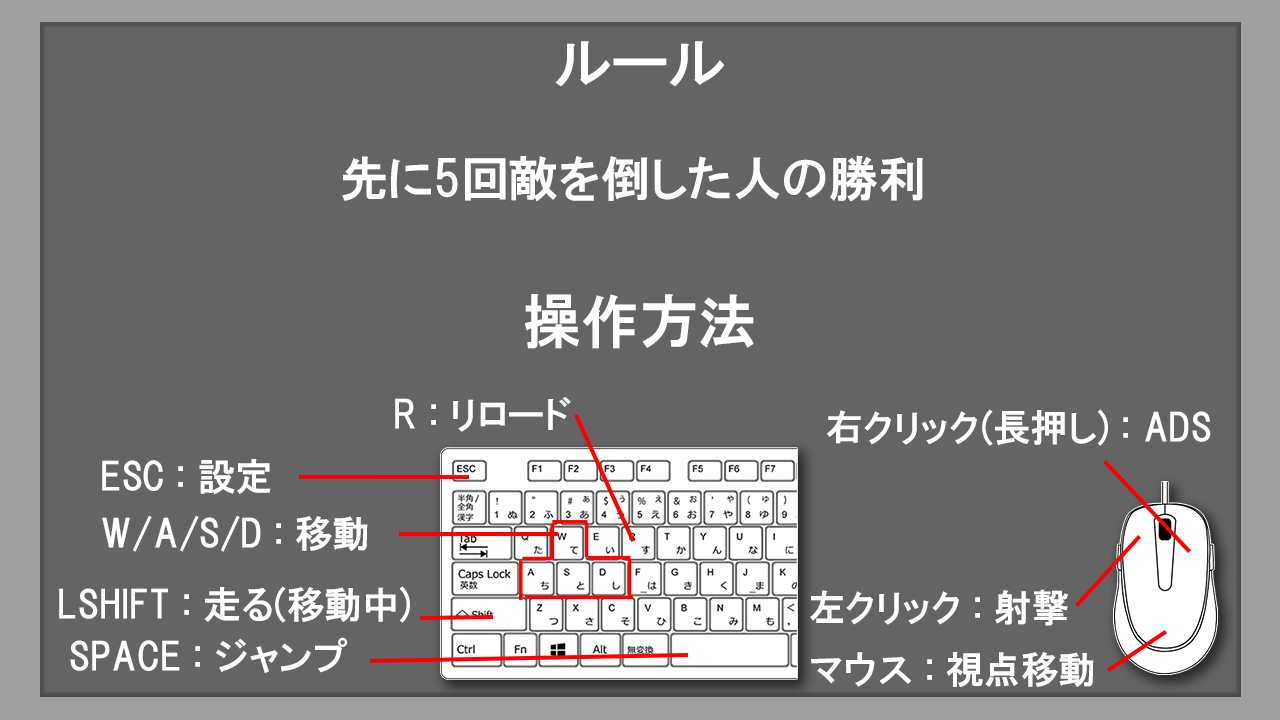
<style>
.page{position:relative;width:1280px;height:720px;background:#646464}
.page>*{position:absolute;margin:0}
.t1{font:58.3px "HGPGothicE";color:#ffffff}
.t2{font:48.8px "HGPGothicE";color:#ffffff}
.t3{font:37.5px "HGPGothicE";color:#ffffff}
</style>
<div class="page">
<p class="t1" style="left:555px;top:41px;width:170px;height:46px">ルール</p>
<p class="t2" style="left:342px;top:155px;width:581px;height:47px">先に5回敵を倒した人の勝利</p>
<p class="t1" style="left:524px;top:294px;width:230px;height:55px">操作方法</p>
<p class="t3" style="left:395px;top:396px;width:176px;height:36px">R : リロード</p>
<p class="t3" style="left:827px;top:409px;width:384px;height:37px">右クリック(長押し) : ADS</p>
<p class="t3" style="left:102px;top:459px;width:169px;height:36px">ESC : 設定</p>
<p class="t3" style="left:102px;top:515px;width:266px;height:37px">W/A/S/D : 移動</p>
<p class="t3" style="left:59px;top:586px;width:351px;height:37px">LSHIFT : 走る(移動中)</p>
<p class="t3" style="left:810px;top:589px;width:258px;height:37px">左クリック : 射撃</p>
<p class="t3" style="left:70px;top:637px;width:278px;height:36px">SPACE : ジャンプ</p>
<p class="t3" style="left:811px;top:652px;width:283px;height:35px">マウス : 視点移動</p>
</div>
